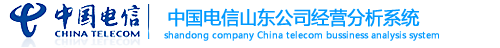
<style>
.page{position:relative;width:500px;height:48px;background:#ffffff}
.page>*{position:absolute;margin:0}
.t1{font:18px "MicrosoftYaHei";color:#0099ff;font-weight:bold}
.t2{font:9px "MicrosoftYaHei";color:#0099ff;font-weight:bold}
</style>
<div class="page">
<p class="t1" style="left:168px;top:8px;width:252px;height:19px">中国电信山东公司经营分析系统</p>
<p class="t2" style="left:164px;top:31px;width:275px;height:10px">shandong company China telecom bussiness analysis system</p>
</div>
